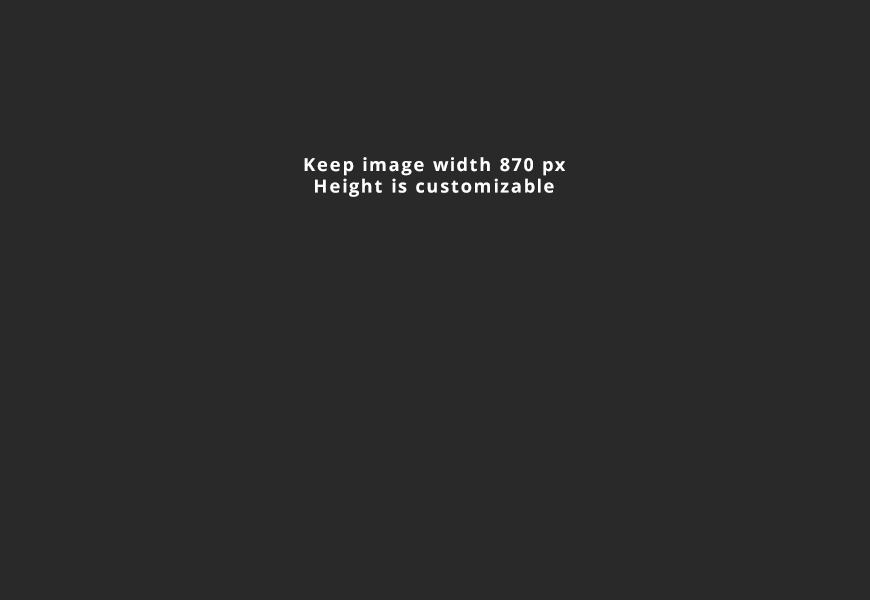
<style>
.page{position:relative;width:870px;height:600px;background:#292929}
.page>*{position:absolute;margin:0}
.t1{font:18px/21.6px "OpenSans-Bold";letter-spacing:0.1em;color:#ffffff}
</style>
<div class="page">
<p class="t1" style="left:304px;top:157px;width:261px;height:40px;text-align:center">Keep image width 870 px<br>Height is customizable</p>
</div>
